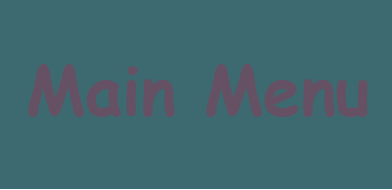
<style>
.page{position:relative;width:392px;height:190px;background:#3d6970}
.page>*{position:absolute;margin:0}
.t1{font:66.7px "ComicSansMS-Bold";color:#655064}
</style>
<div class="page">
<p class="t1" style="left:28px;top:64px;width:340px;height:53px">Main Menu</p>
</div>
